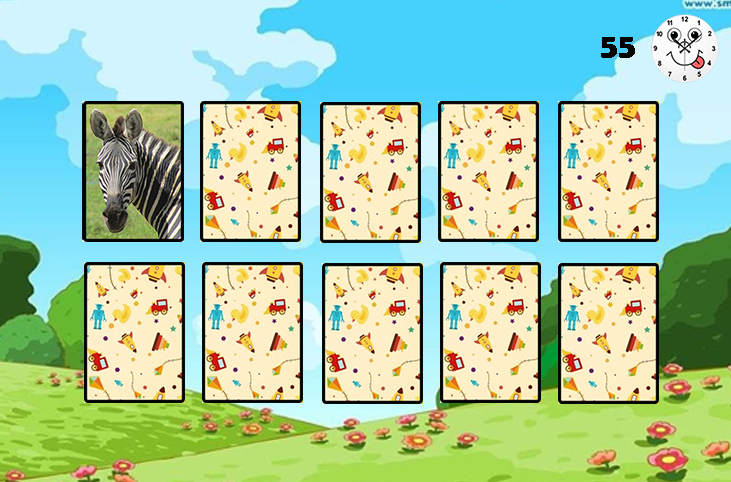
<style>
.page{position:relative;width:731px;height:482px}
.page>*{position:absolute;margin:0}
.t1{font:36px "BerlinSansFBDemi-Bold";color:#000000}
</style>
<div class="page">
<p class="t1" style="left:601px;top:37px;width:34px;height:21px">55</p>
</div>
